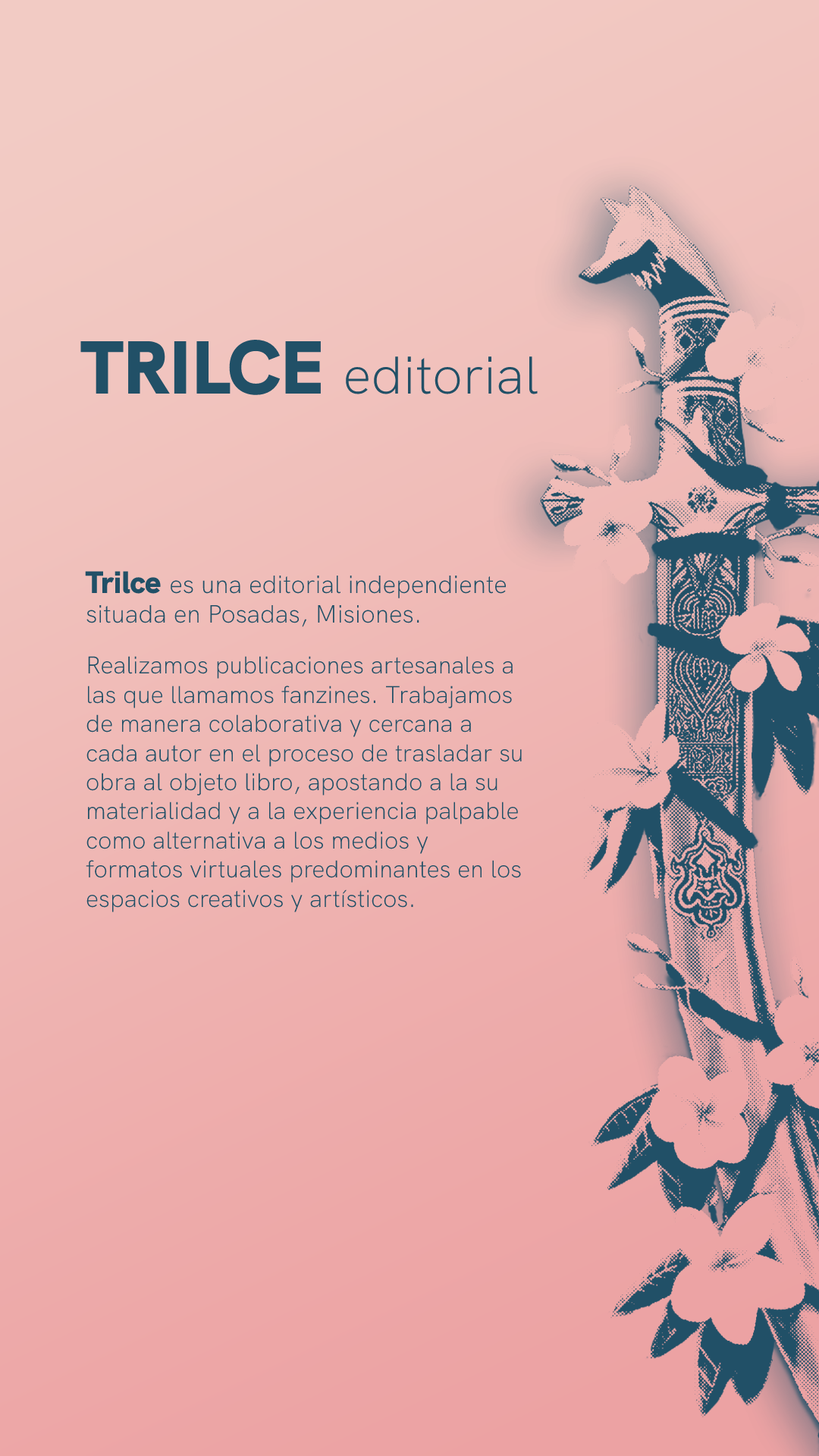
<style>
.page{position:relative;width:819px;height:1456px}
.page>*{position:absolute;margin:0}
.t1{font:53.1px "HKGrotesk-Light";color:#215067}
.t2{font:75.1px "HKGrotesk-Black";color:#215067}
.t3{font:24.3px "HKGrotesk-Light";color:#215067}
.t4{font:31.1px "HKGrotesk-Black";color:#215067}
.t5{font:25px "HKGrotesk-Light";color:#215067}
</style>
<div class="page">
<p class="t1" style="left:80px;top:340px;width:458px;height:55px"><span class="t2">TRILCE </span>editorial</p>
<p class="t3" style="left:85px;top:571px;width:437px;height:341px"><span class="t4">Trilce </span><span class="t5">es una editorial independiente<br>situada en Posadas, Misiones.<br><br></span>Realizamos publicaciones artesanales a las que llamamos fanzines. Trabajamos de manera colaborativa y cercana a cada autor en el proceso de trasladar su obra al objeto libro, apostando a la su materialidad y a la experiencia palpable como alternativa a los medios y formatos virtuales predominantes en los espacios creativos y artísticos.</p>
</div>
